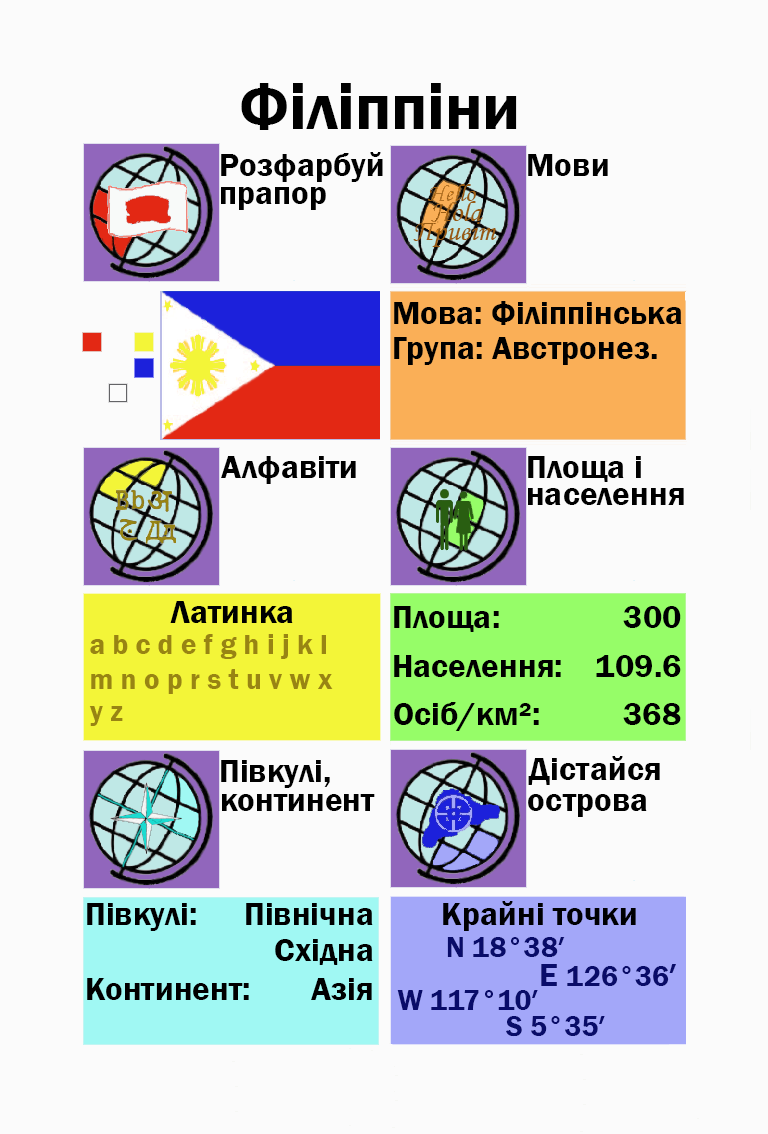
<style>
.page{position:relative;width:768px;height:1134px;background:#fbfbfb}
.page>*{position:absolute;margin:0}
.t1{font:66.7px "FranklinGothic-Demi";color:#000000}
.t2{font:33.3px "FranklinGothic-Demi";color:#000000}
.t3{font:33.3px "FranklinGothic-Demi";color:#000003}
.t4{font:29.2px "FranklinGothic-Demi";color:#988413}
.t5{font:29.2px "FranklinGothic-Demi";color:#090c69}
.t6{font:33.3px "FranklinGothic-Demi";color:#090c69}
</style>
<div class="page">
<p class="t1" style="left:241px;top:83px;width:276px;height:47px">Філіппіни</p>
<p class="t2" style="left:221px;top:152px;width:162px;height:30px">Розфарбуй</p>
<p class="t2" style="left:528px;top:154px;width:80px;height:22px">Мови</p>
<p class="t2" style="left:221px;top:187px;width:105px;height:23px">прапор</p>
<p class="t2" style="left:394px;top:301px;width:288px;height:24px">Мова: Філіппінська</p>
<p class="t2" style="left:394px;top:337px;width:263px;height:28px">Група: Австронез.</p>
<p class="t2" style="left:221px;top:456px;width:135px;height:28px">Алфавіти</p>
<p class="t2" style="left:528px;top:456px;width:113px;height:26px">Площа і</p>
<p class="t2" style="left:528px;top:488px;width:156px;height:17px">населення</p>
<p class="t2" style="left:170px;top:601px;width:123px;height:22px">Латинка</p>
<p class="t2" style="left:394px;top:606px;width:105px;height:26px">Площа:</p>
<p class="t3" style="left:623px;top:606px;width:58px;height:22px">300</p>
<p class="t4" style="left:90px;top:634px;width:236px;height:25px">a b c d e f g h i j k l</p>
<p class="t2" style="left:394px;top:655px;width:167px;height:22px">Населення:</p>
<p class="t2" style="left:596px;top:655px;width:85px;height:22px">109.6</p>
<p class="t4" style="left:91px;top:669px;width:242px;height:25px">m n o p r s t u v w x</p>
<p class="t2" style="left:394px;top:702px;width:145px;height:29px">Осіб/км²:</p>
<p class="t4" style="left:89px;top:706px;width:34px;height:20px">y z</p>
<p class="t2" style="left:623px;top:703px;width:58px;height:22px">368</p>
<p class="t2" style="left:221px;top:760px;width:109px;height:28px">Півкулі,</p>
<p class="t2" style="left:528px;top:756px;width:132px;height:29px">Дістайся</p>
<p class="t2" style="left:222px;top:794px;width:153px;height:17px">континент</p>
<p class="t2" style="left:528px;top:794px;width:119px;height:23px">острова</p>
<p class="t2" style="left:87px;top:903px;width:109px;height:28px">Півкулі:</p>
<p class="t2" style="left:246px;top:903px;width:127px;height:22px">Північна</p>
<p class="t3" style="left:443px;top:901px;width:193px;height:30px">Крайні точки</p>
<p class="t2" style="left:275px;top:939px;width:98px;height:26px">Східна</p>
<p class="t5" style="left:447px;top:937px;width:118px;height:20px">N 18°38′</p>
<p class="t5" style="left:541px;top:964px;width:135px;height:22px"><span class="t6">E </span>126°36<span class="t6">′</span></p>
<p class="t2" style="left:87px;top:978px;width:162px;height:22px">Континент:</p>
<p class="t2" style="left:311px;top:978px;width:61px;height:22px">Азія</p>
<p class="t5" style="left:397px;top:990px;width:141px;height:20px">W 117°10′</p>
<p class="t5" style="left:506px;top:1016px;width:99px;height:21px">S 5°35′</p>
</div>
